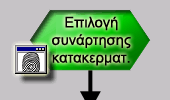
<style>
.page{position:relative;width:170px;height:100px;background:#c6c3c6}
.page>*{position:absolute;margin:0}
.t1{font:14.7px "ArialMT";color:#000000}
</style>
<div class="page">
<p class="t1" style="left:52px;top:16px;width:79px;height:50px;text-align:center">Επιλογή<br>συνάρτησης<br>κατακερματ.</p>
</div>
